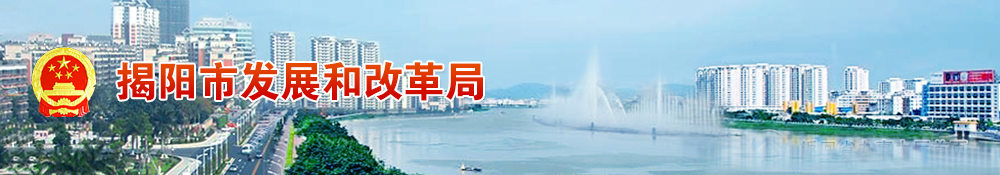
<style>
.page{position:relative;width:1000px;height:175px}
.page>*{position:absolute;margin:0}
.t1{font:42px "FZDHTJW--GB1-0";letter-spacing:-0.02em}
</style>
<div class="page">
<p class="t1" style="left:117px;top:61px;width:366px;height:40px">揭阳市发展和改革局</p>
</div>
